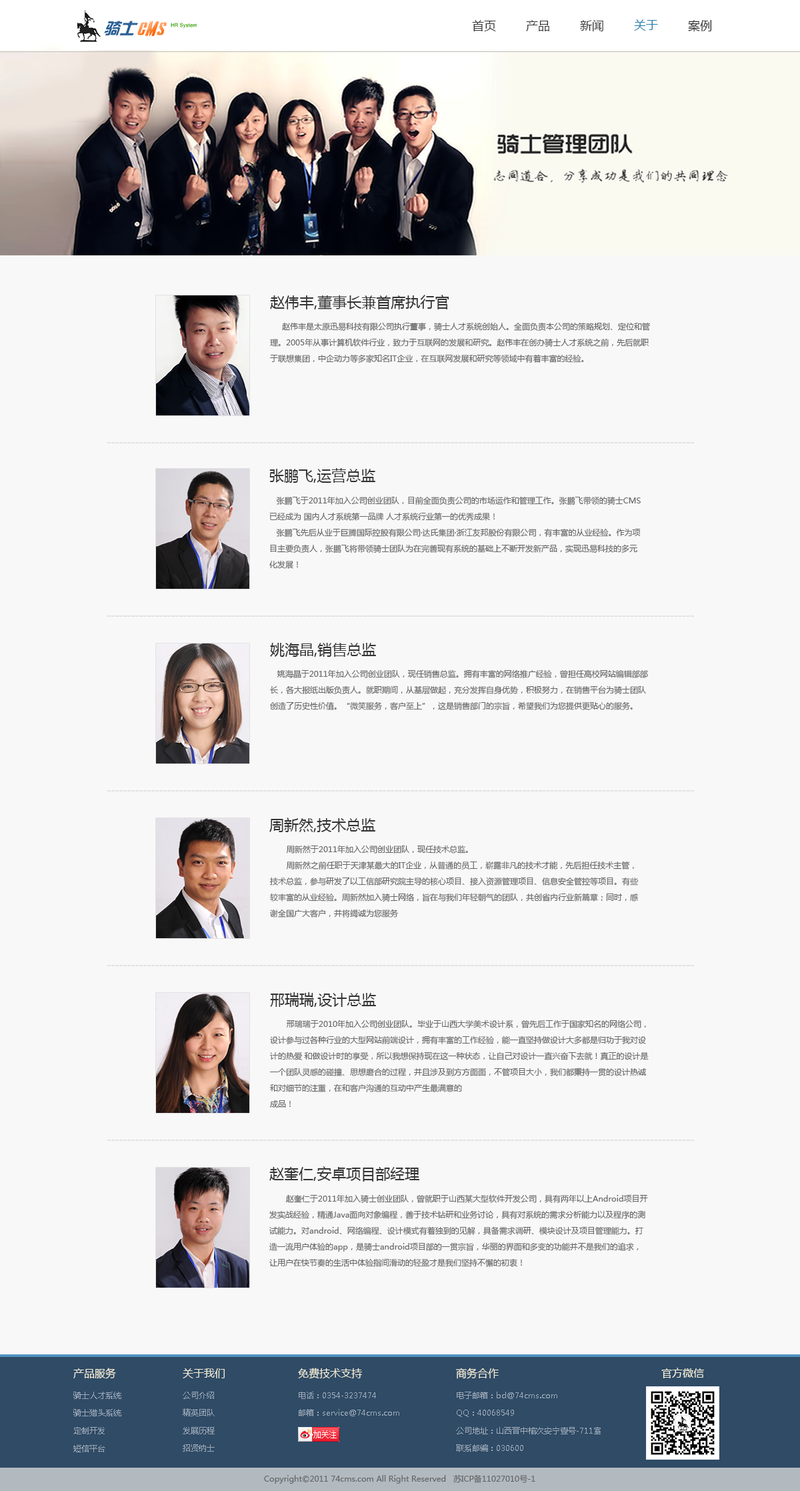
<style>
.page{position:relative;width:800px;height:1491px;background:#f8f8f8}
.page>*{position:absolute;margin:0}
.t1{font:12px "MicrosoftYaHei";color:#333333}
.t2{font:12px "MicrosoftYaHei";color:#247faf}
.t3{font:14.7px "MicrosoftYaHei";color:#333333}
.t4{font:8px/16px "MicrosoftYaHei";color:#666666}
.t5{font:8px/16px "SimSun";color:#333333}
.t6{font:12px "ArialMT";color:#e2e2e2}
.t7{font:10.7px "MicrosoftYaHei";color:#f6eed7}
.t8{font:8px "MicrosoftYaHei";color:#9da9b7}
.t9{font:8px "MicrosoftYaHei";color:#666666}
</style>
<div class="page">
<p class="t1" style="left:472px;top:20px;width:24px;height:11px">首页</p>
<p class="t1" style="left:526px;top:20px;width:23px;height:11px">产品</p>
<p class="t1" style="left:580px;top:20px;width:23px;height:11px">新闻</p>
<p class="t2" style="left:634px;top:19px;width:24px;height:12px">关于</p>
<p class="t1" style="left:688px;top:20px;width:24px;height:12px">案例</p>
<p class="t3" style="left:270px;top:295px;width:179px;height:14px">赵伟丰,董事长兼首席执行官</p>
<p class="t4" style="left:270px;top:322px;width:381px;height:41px"><span class="t5">   </span>赵伟丰是太原迅易科技有限公司执行董事，骑士人才系统创始人。全面负责本公司的策略规划、定位和管理。2005年从事计算机软件行业，致力于互联网的发展和研究。赵伟丰在创办骑士人才系统之前，先后就职于联想集团，中企动力等多家知名IT企业，在互联网发展和研究等领域中有着丰富的经验。</p>
<p class="t6" style="left:107px;top:442px;width:587px;height:1px">---------------------------------------------------------------------------------------------------------------------------------------------------</p>
<p class="t3" style="left:269px;top:468px;width:106px;height:15px">张鹏飞,运营总监</p>
<p class="t4" style="left:269px;top:496px;width:372px;height:73px">张鹏飞于2011年加入公司创业团队，目前全面负责公司的市场运作和管理工作。张鹏飞带领的骑士CMS已经成为 国内人才系统第一品牌 人才系统行业第一的优秀成果！<br>   张鹏飞先后从业于巨腾国际控股有限公司·达氏集团·浙江友邦股份有限公司，有丰富的从业经验。作为项目主要负责人，张鹏飞将带领骑士团队为在完善现有系统的基础上不断开发新产品，实现迅易科技的多元化发展！</p>
<p class="t6" style="left:107px;top:615px;width:587px;height:2px">---------------------------------------------------------------------------------------------------------------------------------------------------</p>
<p class="t3" style="left:270px;top:643px;width:106px;height:14px">姚海晶,销售总监</p>
<p class="t4" style="left:270px;top:669px;width:378px;height:41px">姚海晶于2011年加入公司创业团队，现任销售总监。拥有丰富的网络推广经验，曾担任高校网站编辑部部长，各大报纸出版负责人。就职期间，从基层做起，充分发挥自身优势，积极努力，在销售平台为骑士团队创造了历史性价值。“微笑服务，客户至上”，这是销售部门的宗旨，希望我们为您提供更贴心的服务。</p>
<p class="t6" style="left:107px;top:790px;width:587px;height:1px">---------------------------------------------------------------------------------------------------------------------------------------------------</p>
<p class="t3" style="left:269px;top:817px;width:106px;height:15px">周新然,技术总监</p>
<p class="t4" style="left:269px;top:845px;width:370px;height:72px">周新然于2011年加入公司创业团队，现任技术总监。<br>       周新然之前任职于天津某最大的IT企业，从普通的员工，崭露非凡的技术才能，先后担任技术主管，技术总监，参与研发了以工信部研究院主导的核心项目、接入资源管理项目、信息安全管控等项目。有些较丰富的从业经验。周新然加入骑士网络，旨在与我们年轻朝气的团队，共创省内行业新篇章；同时，感谢全国广大客户，并将竭诚为您服务</p>
<p class="t6" style="left:107px;top:965px;width:587px;height:1px">---------------------------------------------------------------------------------------------------------------------------------------------------</p>
<p class="t3" style="left:270px;top:992px;width:106px;height:15px">邢瑞瑞,设计总监</p>
<p class="t4" style="left:269px;top:1019px;width:380px;height:88px">邢瑞瑞于2010年加入公司创业团队。毕业于山西大学美术设计系，曾先后工作于国家知名的网络公司，设计参与过各种行业的大型网站前端设计，拥有丰富的工作经验，能一直坚持做设计大多都是归功于我对设计的热爱 和做设计时的享受，所以我想保持现在这一种状态，让自己对设计一直兴奋下去就！真正的设计是一个团队灵感的碰撞、思想磨合的过程，并且涉及到方方面面，不管项目大小，我们都秉持一贯的设计热诚和对细节的注重，在和客户沟通的互动中产生最满意的<br>成品！</p>
<p class="t6" style="left:107px;top:1139px;width:587px;height:2px">---------------------------------------------------------------------------------------------------------------------------------------------------</p>
<p class="t3" style="left:269px;top:1166px;width:151px;height:15px">赵奎仁,安卓项目部经理</p>
<p class="t4" style="left:269px;top:1194px;width:379px;height:73px">赵奎仁于2011年加入骑士创业团队，曾就职于山西某大型软件开发公司，具有两年以上Android项目开发实战经验，精通Java面向对象编程，善于技术钻研和业务讨论，具有对系统的需求分析能力以及程序的测试能力。对android、网络编程、设计模式有着独到的见解，具备需求调研、模块设计及项目管理能力。打造一流用户体验的app，是骑士android项目部的一贯宗旨，华丽的界面和多变的功能并不是我们的追求，让用户在快节奏的生活中体验指间滑动的轻盈才是我们坚持不懈的初衷！</p>
<p class="t7" style="left:73px;top:1367px;width:43px;height:12px">产品服务</p>
<p class="t7" style="left:183px;top:1368px;width:42px;height:10px">关于我们</p>
<p class="t7" style="left:298px;top:1367px;width:64px;height:12px">免费技术支持</p>
<p class="t7" style="left:456px;top:1367px;width:43px;height:12px">商务合作</p>
<p class="t7" style="left:661px;top:1367px;width:43px;height:11px">官方微信</p>
<p class="t8" style="left:73px;top:1391px;width:48px;height:8px">骑士人才系统</p>
<p class="t8" style="left:183px;top:1391px;width:31px;height:8px">公司介绍</p>
<p class="t8" style="left:299px;top:1391px;width:77px;height:8px">电话：0354-3237474</p>
<p class="t8" style="left:457px;top:1391px;width:100px;height:8px">电子邮箱：bd@74cms.com</p>
<p class="t8" style="left:73px;top:1409px;width:48px;height:7px">骑士猎头系统</p>
<p class="t8" style="left:183px;top:1408px;width:32px;height:8px">精英团队</p>
<p class="t8" style="left:299px;top:1409px;width:100px;height:7px">邮箱：service@74cms.com</p>
<p class="t8" style="left:457px;top:1409px;width:57px;height:8px">QQ：40068549</p>
<p class="t8" style="left:73px;top:1427px;width:32px;height:7px">定制开发</p>
<p class="t8" style="left:183px;top:1427px;width:32px;height:7px">发展历程</p>
<p class="t8" style="left:456px;top:1427px;width:145px;height:7px">公司地址：山西晋中榆次安宁壹号-711室</p>
<p class="t8" style="left:73px;top:1445px;width:32px;height:7px">短信平台</p>
<p class="t8" style="left:183px;top:1444px;width:32px;height:7px">招贤纳士</p>
<p class="t8" style="left:456px;top:1444px;width:67px;height:7px">联系邮编：030600</p>
<p class="t9" style="left:264px;top:1474px;width:271px;height:9px">Copyright©2011 74cms.com All Right Reserved   苏ICP备11027010号-1</p>
</div>
